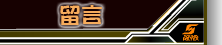
<style>
.page{position:relative;width:222px;height:45px;background:#170101}
.page>*{position:absolute;margin:0}
.t1{font:22px "DFPOP1-W9-HK-BF";color:#f6ac5c}
</style>
<div class="page">
<p class="t1" style="left:60px;top:5px;width:42px;height:20px">留言</p>
</div>
